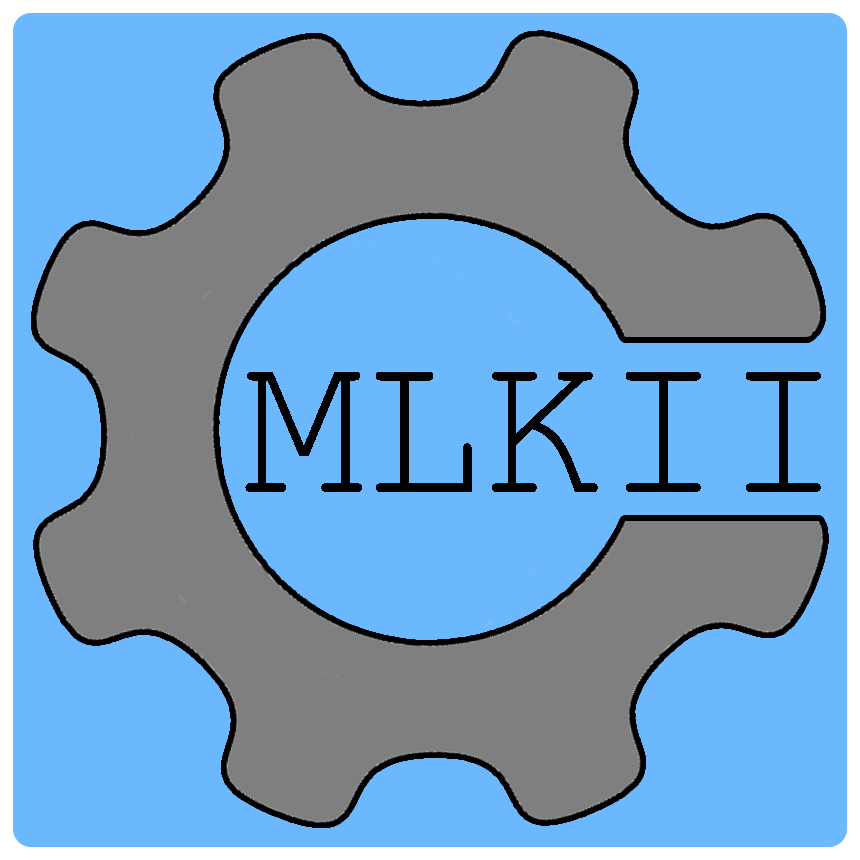
<style>
.page{position:relative;width:860px;height:860px;background:#6cb8ff}
.page>*{position:absolute;margin:0}
.t1{font:213.8px "NimbusMono-Regular";color:#000000;scale:0.94 1}
</style>
<div class="page">
<p class="t1" style="left:245px;top:371px;width:576px;height:122px">MLKII</p>
</div>
